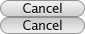
<style>
.page{position:relative;width:85px;height:34px}
.page>*{position:absolute;margin:0}
.t1{font:13px "LucidaGrande";letter-spacing:-0.025em;color:#000000}
</style>
<div class="page">
<p class="t1" style="left:23px;top:2px;width:39px;height:11px">Cancel</p>
<p class="t1" style="left:23px;top:19px;width:39px;height:11px">Cancel</p>
</div>
